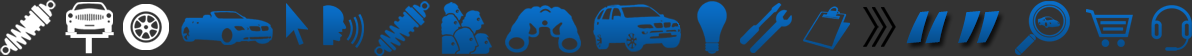
<style>
.page{position:relative;width:1192px;height:56px;background:#333333}
.page>*{position:absolute;margin:0}
.t1{font:121.6px "MyriadPro-BoldCond";text-transform:uppercase}
</style>
<div class="page">
<p class="t1" style="left:906px;top:11px;width:42px;height:33px">“</p>
<p class="t1" style="left:958px;top:11px;width:42px;height:32px;rotate:-180deg">“</p>
</div>
